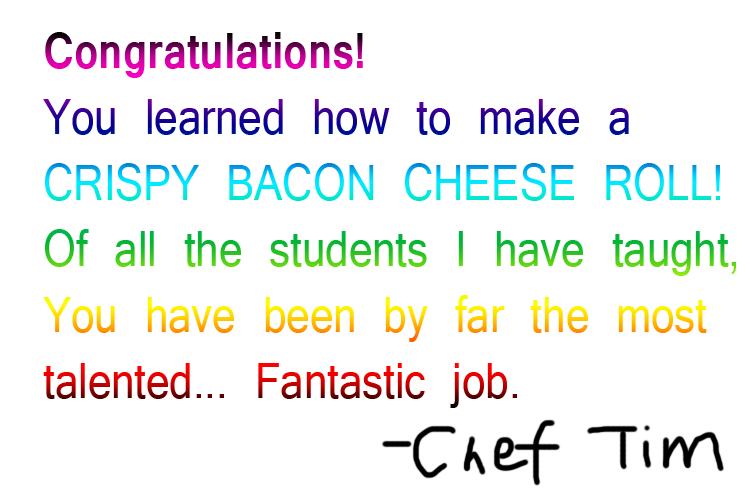
<style>
.page{position:relative;width:750px;height:500px;background:#ffffff}
.page>*{position:absolute;margin:0}
.t1{font:55px "Latha";scale:0.85 1}
.t2{font:55px "Latha-Bold";scale:0.85 1}
</style>
<div class="page">
<p class="t1" style="left:43px;top:32px;width:693px;height:376px"><span class="t2">Congratulations!<br></span>You learned how to make a<br>CRISPY BACON CHEESE ROLL!<br>Of all the students I have taught,<br>You have been by far the most<br>talented... Fantastic job.</p>
</div>
